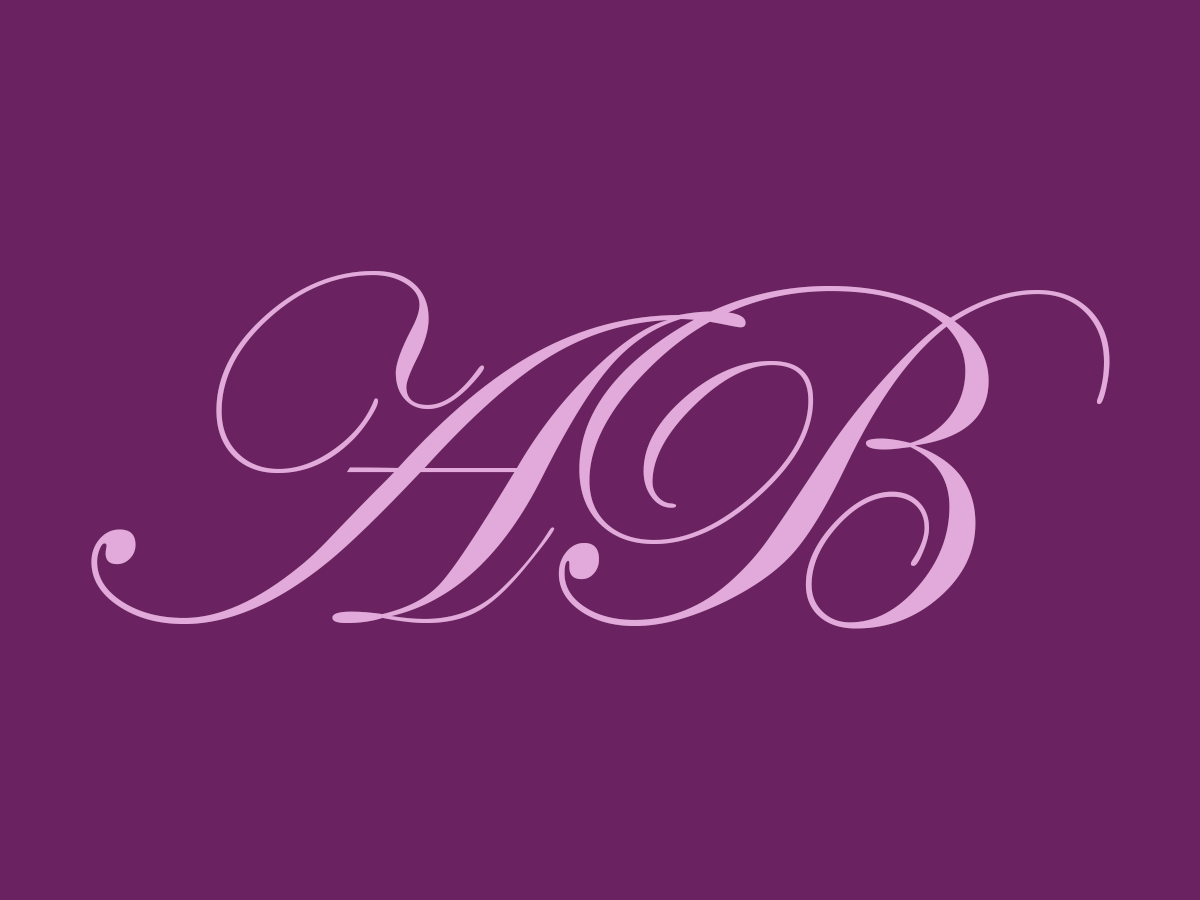
<style>
.page{position:relative;width:1200px;height:900px;background:#6b2260}
.page>*{position:absolute;margin:0}
.t1{font:500px "EdwardianScriptITC";color:#e2aada}
</style>
<div class="page">
<p class="t1" style="left:91px;top:271px;width:1019px;height:358px">AB</p>
</div>
